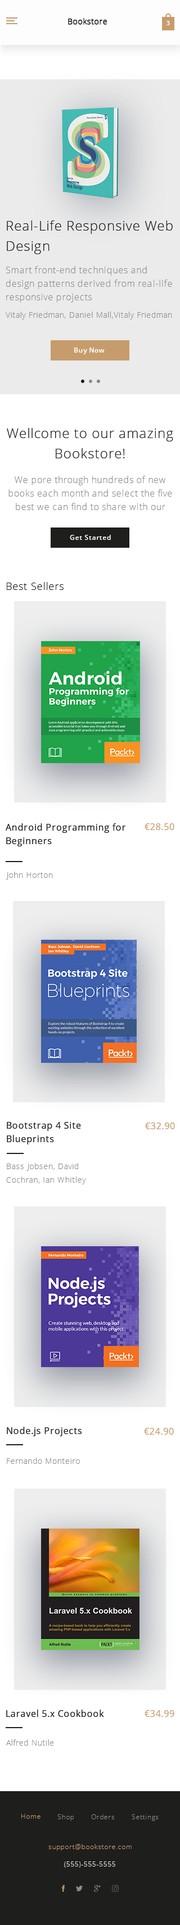
<style>
.page{position:relative;width:180px;height:1925px;background:#ffffff}
.page>*{position:absolute;margin:0}
.t1{font:13.5px/20.2px "OpenSans-Light";letter-spacing:0.05em;color:#1e1e1c}
.t2{font:9px/13.5px "OpenSans-Light";letter-spacing:0.05em;color:#8c8c8c}
.t3{font:7.9px "OpenSans-Light";letter-spacing:0.05em;color:#8c8c8c}
.t4{font:6.8px "OpenSans-Semibold";letter-spacing:0.05em;color:#fffefe}
.t5{font:13.5px/20.2px "OpenSans-Light";letter-spacing:0.05em;color:#212121}
.t6{font:10.1px "OpenSans-Light";letter-spacing:0.05em;color:#1e1e1c}
.t7{font:9px/13.5px "OpenSans";letter-spacing:0.05em;color:#1e1e1c}
.t8{font:9px "OpenSans";letter-spacing:0.05em;color:#c69c6d}
.t9{font:7.9px/13.5px "OpenSans-Light";letter-spacing:0.05em;color:#8c8c8c}
.t10{font:9px "OpenSans";letter-spacing:0.05em;color:#1e1e1c}
</style>
<div class="page">
<p class="t1" style="left:7px;top:220px;width:166px;height:34px">Real-Life Responsive Web Design</p>
<p class="t2" style="left:6px;top:266px;width:166px;height:37px">Smart front-end techniques and design patterns derived from real-life responsive projects</p>
<p class="t3" style="left:6px;top:312px;width:166px;height:8px">Vitaly Friedman, Daniel Mall,Vitaly Friedman</p>
<p class="t4" style="left:74px;top:348px;width:31px;height:6px">Buy Now</p>
<p class="t5" style="left:7px;top:428px;width:166px;height:30px;text-align:center">Wellcome to our amazing Bookstore!</p>
<p class="t2" style="left:8px;top:476px;width:164px;height:34px;text-align:center">We pore through hundreds of new books each month and select the five best we can find to share with our members.</p>
<p class="t4" style="left:70px;top:535px;width:41px;height:5px">Get Started</p>
<p class="t6" style="left:7px;top:582px;width:57px;height:8px">Best Sellers</p>
<p class="t7" style="left:6px;top:824px;width:119px;height:23px">Android Programming for Beginners</p>
<p class="t8" style="left:145px;top:824px;width:29px;height:6px">€28.50</p>
<p class="t3" style="left:6px;top:872px;width:47px;height:8px">John Horton</p>
<p class="t7" style="left:7px;top:1122px;width:74px;height:23px">Bootstrap 4 Site Blueprints</p>
<p class="t8" style="left:145px;top:1123px;width:30px;height:7px">€32.90</p>
<p class="t9" style="left:6px;top:1163px;width:80px;height:22px">Bass Jobsen, David <br>Cochran, Ian Whitley</p>
<p class="t10" style="left:7px;top:1427px;width:75px;height:10px">Node.js Projects</p>
<p class="t8" style="left:144px;top:1428px;width:30px;height:7px">€24.90</p>
<p class="t3" style="left:7px;top:1458px;width:73px;height:6px">Fernando Monteiro</p>
<p class="t10" style="left:6px;top:1710px;width:98px;height:7px">Laravel 5.x Cookbook</p>
<p class="t8" style="left:145px;top:1711px;width:29px;height:6px">€34.99</p>
<p class="t3" style="left:6px;top:1740px;width:48px;height:6px">Alfred Nutile</p>
</div>
